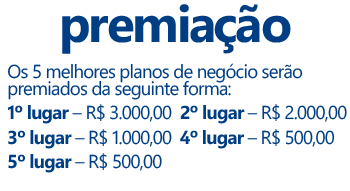
<style>
.page{position:relative;width:350px;height:191px;background:#ffffff}
.page>*{position:absolute;margin:0}
.t1{font:51.3px "SegoeWP-Bold";letter-spacing:-0.04em;color:#003e83}
.t2{font:18.6px/19.9px "SegoeWP";letter-spacing:-0.04em;color:#003e83}
.t3{font:18.6px/17.5px "SegoeWP";letter-spacing:-0.04em;color:#003e83}
.t4{font:18.6px/24.2px "SegoeWP-Bold";letter-spacing:-0.04em;color:#003e83}
.t5{font:18.6px/24.2px "SegoeWP";letter-spacing:-0.04em;color:#003e83}
</style>
<div class="page">
<p class="t1" style="left:62px;top:4px;width:229px;height:50px">premiação</p>
<p class="t2" style="left:7px;top:63px;width:340px;height:110px">Os 5 melhores planos de negócio serão <br><span class="t3">premiados da seguinte forma:<br></span><span class="t4">1º lugar</span><span class="t5"> – R$ 3.000,00  </span><span class="t4">2º lugar</span><span class="t5"> – R$ 2.000,00<br></span><span class="t4">3º lugar</span><span class="t5"> – R$ 1.000,00  </span><span class="t4">4º lugar</span><span class="t5"> – R$ 500,00<br></span><span class="t4">5º lugar </span><span class="t5">– R$ 500,00</span></p>
</div>
